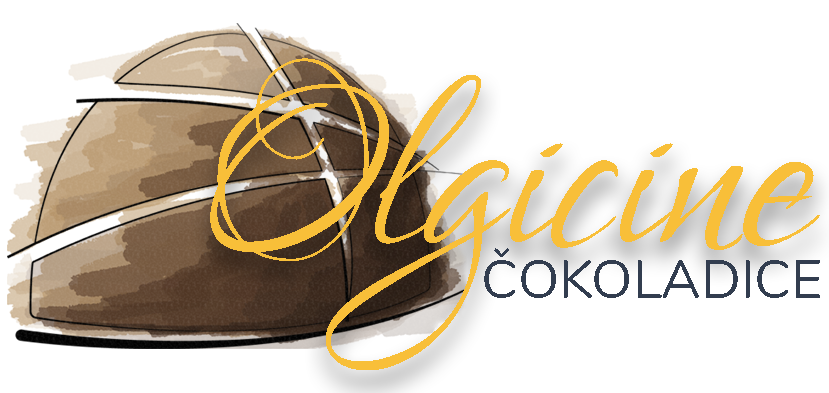
<style>
.page{position:relative;width:829px;height:393px;background:#ffffff}
.page>*{position:absolute;margin:0}
.t1{font:320.8px "LoversQuarrel-Regular";color:#f8bf39;font-style:italic}
.t2{font:54.2px "Nunito-Regular";color:#323d4f;text-transform:uppercase}
</style>
<div class="page">
<p class="t1" style="left:210px;top:58px;width:610px;height:312px">Olgicine</p>
<p class="t2" style="left:484px;top:248px;width:336px;height:50px">ČOKOLADICE</p>
</div>
